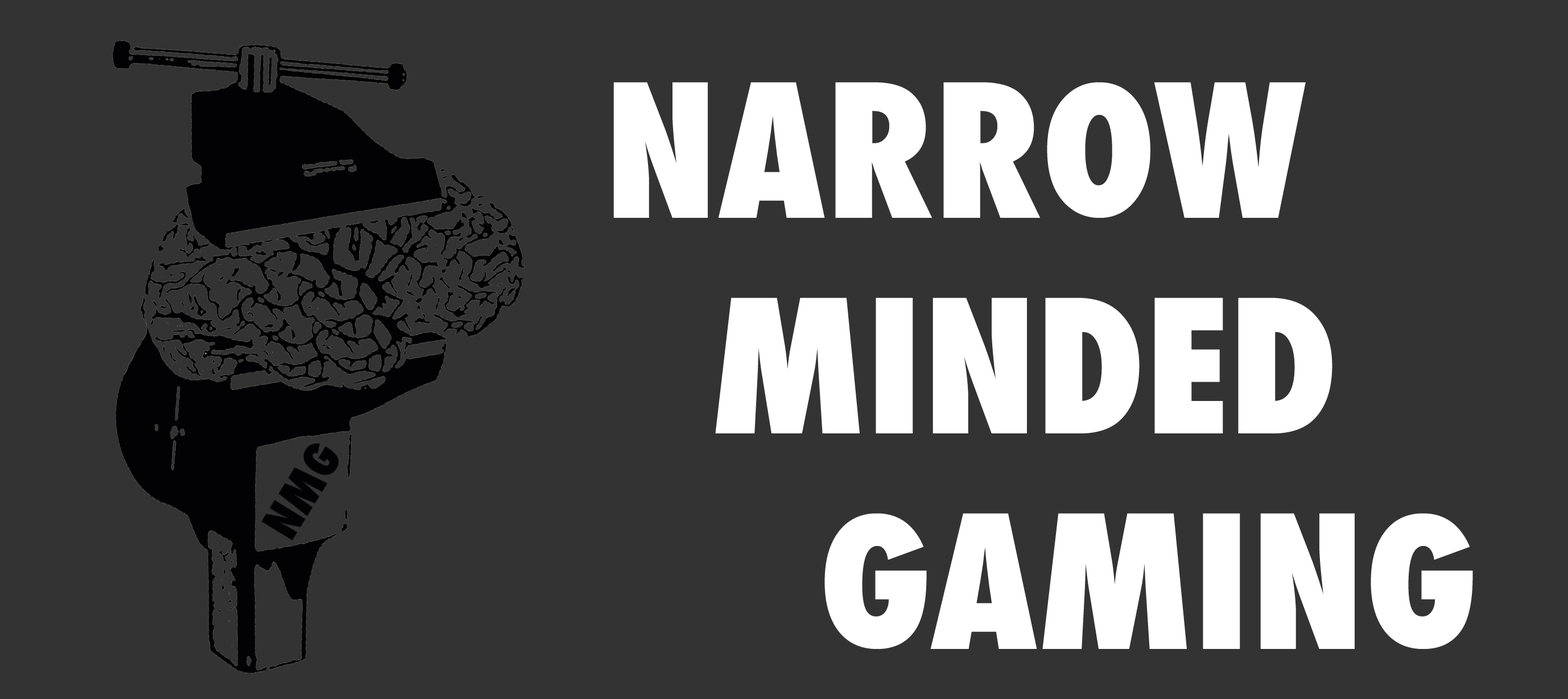
<style>
.page{position:relative;width:1568px;height:699px;background:#333333}
.page>*{position:absolute;margin:0}
.t1{font:179.8px "Futura-CondensedExtraBold";color:#ffffff}
</style>
<div class="page">
<p class="t1" style="left:613px;top:82px;width:860px;height:567px">NARROW<br>  MINDED<br>    GAMING</p>
</div>
